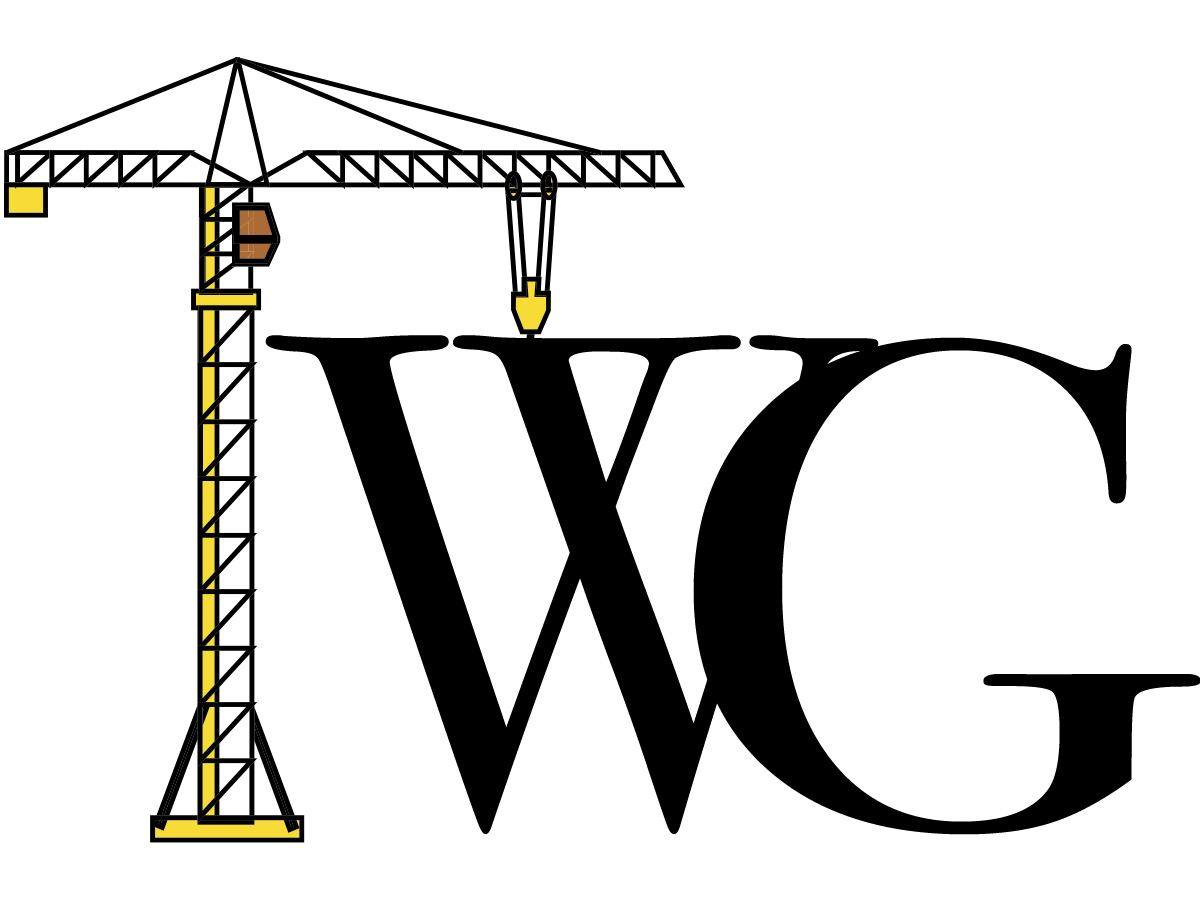
<style>
.page{position:relative;width:1200px;height:900px;background:#ffffff}
.page>*{position:absolute;margin:0}
.t1{font:701.5px "BodoniSvtyTwoSCITCTT-Book";letter-spacing:0.005em;color:#000000;scale:0.9 1}
.t2{font:692.6px "BodoniSvtyTwoSCITCTT-Book";letter-spacing:0.005em;color:#000000;scale:1.14 1}
</style>
<div class="page">
<p class="t1" style="left:265px;top:335px;width:614px;height:499px">W</p>
<p class="t2" style="left:693px;top:337px;width:508px;height:498px">G</p>
</div>
